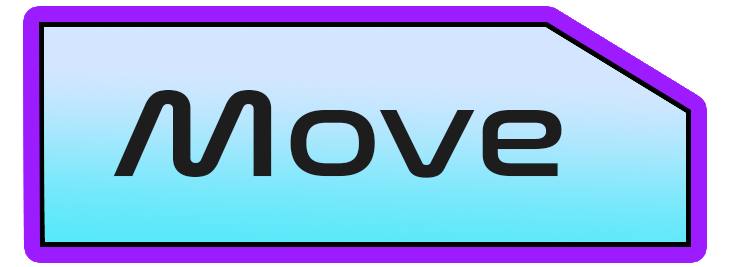
<style>
.page{position:relative;width:737px;height:267px}
.page>*{position:absolute;margin:0}
.t1{font:124.9px "NasalizationRg-Regular";color:#1d1d1d;scale:1.18 1}
</style>
<div class="page">
<p class="t1" style="left:113px;top:90px;width:449px;height:88px">Move</p>
</div>
